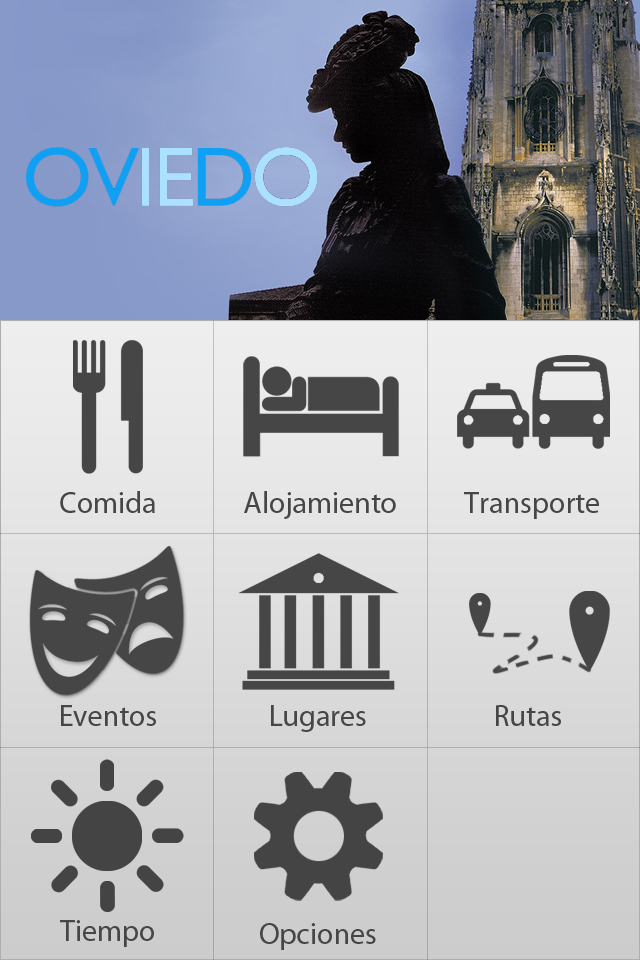
<style>
.page{position:relative;width:640px;height:960px}
.page>*{position:absolute;margin:0}
.t1{font:30px "MyriadPro-Regular";color:#464646}
</style>
<div class="page">
<p class="t1" style="left:60px;top:491px;width:95px;height:22px">Comida</p>
<p class="t1" style="left:244px;top:491px;width:152px;height:28px">Alojamiento</p>
<p class="t1" style="left:464px;top:492px;width:135px;height:27px">Transporte</p>
<p class="t1" style="left:61px;top:705px;width:95px;height:21px">Eventos</p>
<p class="t1" style="left:271px;top:705px;width:95px;height:27px">Lugares</p>
<p class="t1" style="left:496px;top:705px;width:65px;height:21px">Rutas</p>
<p class="t1" style="left:60px;top:920px;width:94px;height:27px">Tiempo</p>
<p class="t1" style="left:260px;top:923px;width:116px;height:27px">Opciones</p>
</div>
